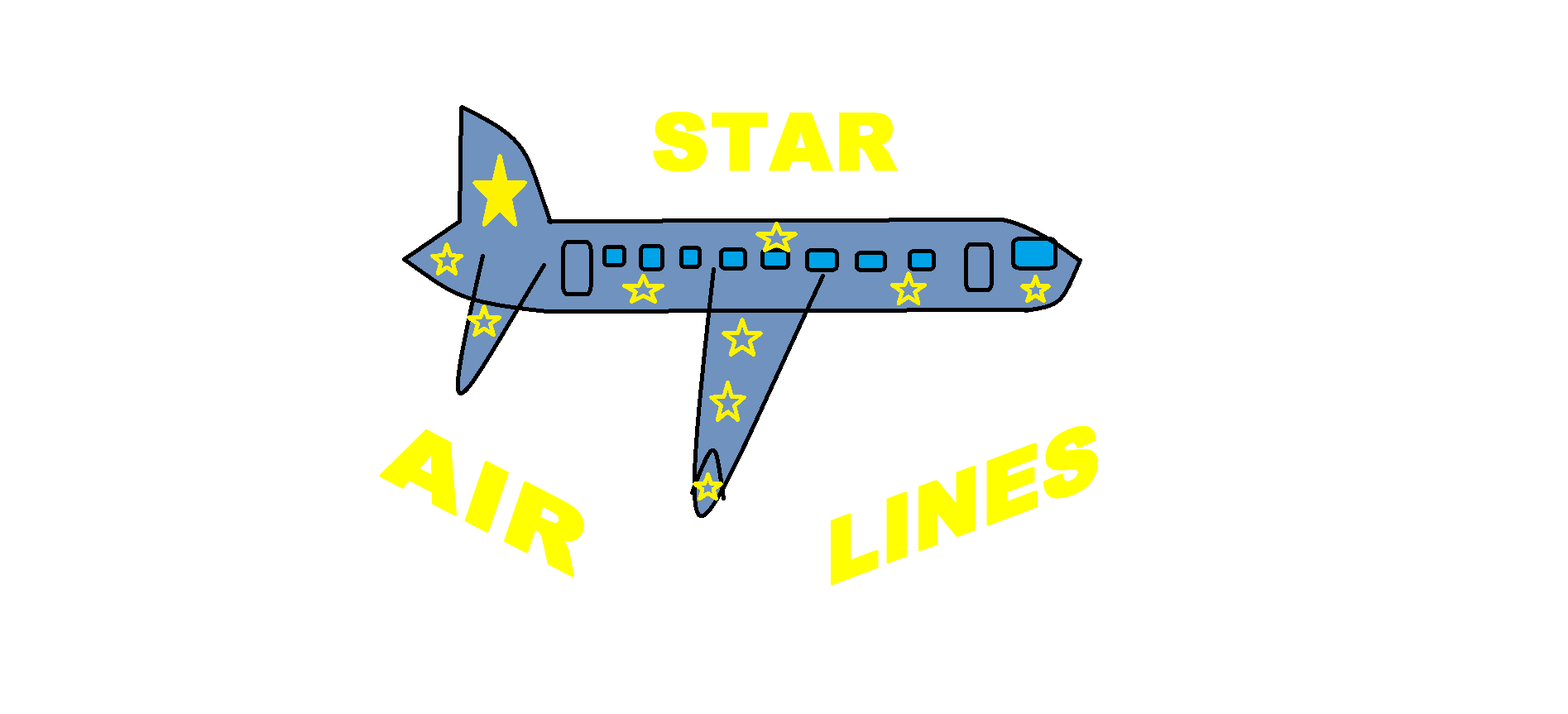
<style>
.page{position:relative;width:1568px;height:714px;background:#ffffff}
.page>*{position:absolute;margin:0}
.t1{font:86.1px "Arial-Black";color:#ffff00;font-weight:bold;scale:1.25 1}
.t2{font:86.8px "Arial-Black";color:#ffff00;font-weight:bold}
</style>
<div class="page">
<p class="t1" style="left:380px;top:429px;width:204px;height:149px;rotate:27deg">AIR</p>
<p class="t1" style="left:380px;top:429px;width:204px;height:149px;rotate:27deg">AIR</p>
<p class="t2" style="left:831px;top:426px;width:267px;height:159px;rotate:-21deg">LINES</p>
</div>
